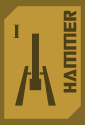
<style>
.page{position:relative;width:85px;height:125px;background:#bf9739}
.page>*{position:absolute;margin:0}
.t1{font:20px "TransformersMovie";letter-spacing:0.04em;color:#4c3f17}
.t2{font:20px "TransformersMovie";letter-spacing:0.06em;color:#4c3f17}
.t3{font:20px "TimesNewRomanPS-BoldMT";letter-spacing:0.04em;color:#4c3f17}
</style>
<div class="page">
<p class="t1" style="left:63px;top:10px;width:14px;height:83px;rotate:-90deg">Ham<span class="t2">m</span>er</p>
<p class="t3" style="left:13px;top:24px;width:7px;height:14px">I</p>
</div>
